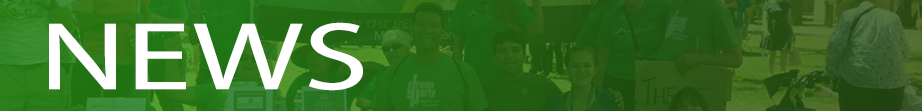
<style>
.page{position:relative;width:922px;height:111px}
.page>*{position:absolute;margin:0}
.t1{font:96.6px "MyriadPro-Regular";color:#ffffff;scale:1.37 1}
</style>
<div class="page">
<p class="t1" style="left:49px;top:22px;width:314px;height:69px">NEWS</p>
</div>
